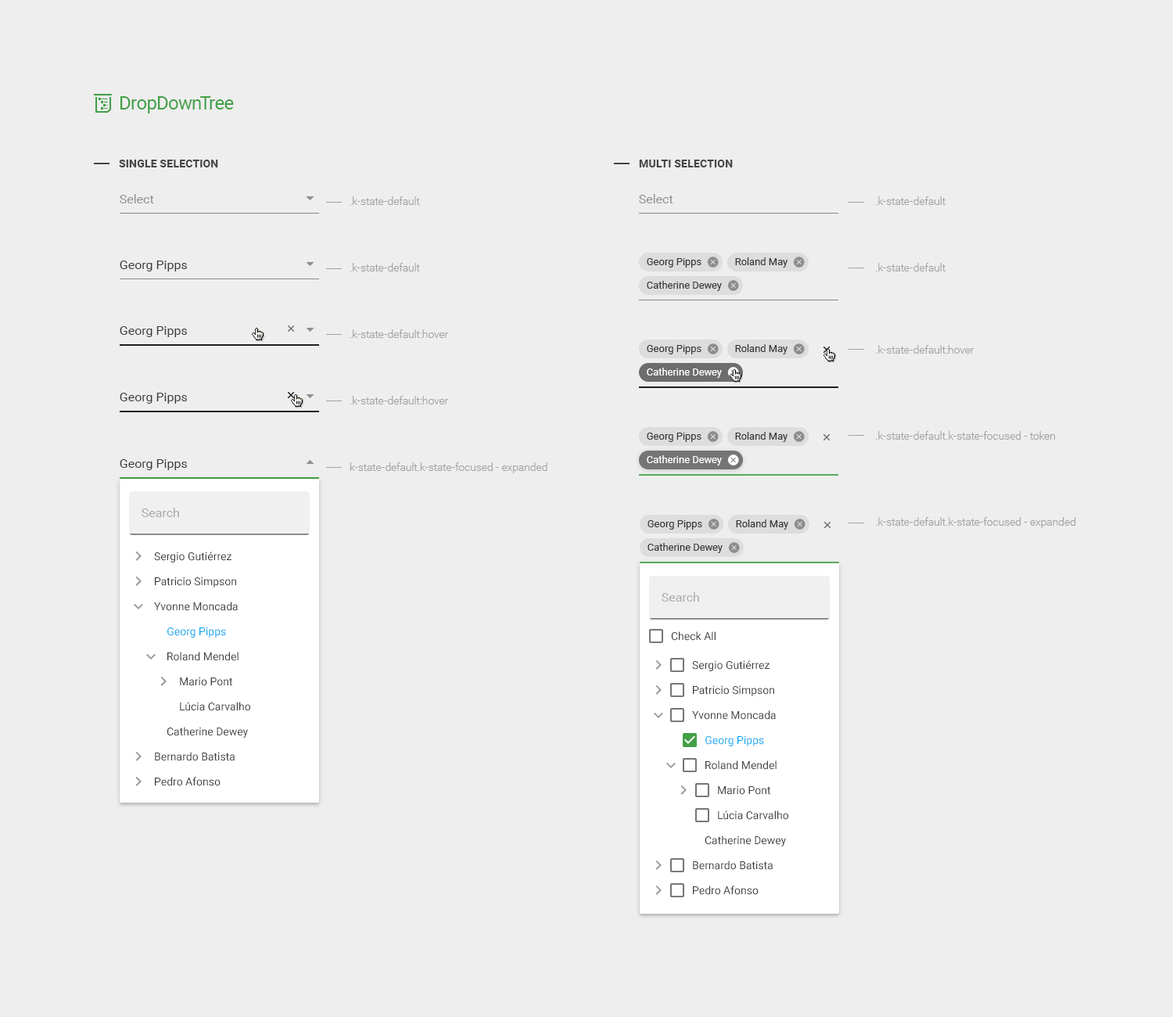
<style>
.page{position:relative;width:1173px;height:1017px;background:#eeeeee}
.page>*{position:absolute;margin:0}
.t1{font:18.8px "Roboto-Regular";letter-spacing:-0.025em;color:#43a047}
.t2{font:10.9px "Roboto-Bold";letter-spacing:0.01em;color:#454545;text-transform:uppercase}
.t3{font:12.5px "Roboto-Regular";color:#8f8f8f}
.t4{font:10.9px/66.5px "Roboto-Light";color:#a1a1a1}
.t5{font:10.2px "Roboto-Regular";color:#363636}
.t6{font:12.5px "Roboto-Regular";color:#3b3b3b}
.t7{font:10.2px "Roboto-Regular";color:#ffffff}
.t8{font:12.5px "Roboto-Regular";color:#a9a9a9}
.t9{font:10.9px/25px "Roboto-Regular";color:#404040}
.t10{font:10.9px "Roboto-Regular";color:#03a9f4}
.t11{font:10.9px "Roboto-Regular";color:#404040}
</style>
<div class="page">
<p class="t1" style="left:120px;top:96px;width:114px;height:17px">DropDownTree</p>
<p class="t2" style="left:119px;top:160px;width:99px;height:7px">single selection</p>
<p class="t2" style="left:639px;top:160px;width:94px;height:7px">multi selection</p>
<p class="t3" style="left:120px;top:194px;width:34px;height:9px">Select</p>
<p class="t4" style="left:350px;top:196px;width:197px;height:277px">.k-state-default<br>.k-state-default<br>.k-state-default:hover<br>.k-state-default:hover<br>k-state-default.k-state-focused - expanded</p>
<p class="t3" style="left:639px;top:194px;width:34px;height:9px">Select</p>
<p class="t4" style="left:876px;top:196px;width:200px;height:332px">.k-state-default<br>.k-state-default<br>.k-state-default:hover<br>.k-state-default.k-state-focused - token<br>.k-state-default.k-state-focused - expanded</p>
<p class="t5" style="left:735px;top:257px;width:53px;height:10px">Roland May</p>
<p class="t6" style="left:120px;top:260px;width:67px;height:11px">Georg Pipps</p>
<p class="t5" style="left:647px;top:258px;width:54px;height:9px">Georg Pipps</p>
<p class="t5" style="left:647px;top:281px;width:75px;height:10px">Catherine Dewey</p>
<p class="t6" style="left:120px;top:326px;width:67px;height:11px">Georg Pipps</p>
<p class="t5" style="left:647px;top:345px;width:54px;height:9px">Georg Pipps</p>
<p class="t5" style="left:735px;top:344px;width:53px;height:10px">Roland May</p>
<p class="t7" style="left:647px;top:368px;width:75px;height:10px">Catherine Dewey</p>
<p class="t6" style="left:120px;top:393px;width:67px;height:11px">Georg Pipps</p>
<p class="t5" style="left:647px;top:432px;width:54px;height:10px">Georg Pipps</p>
<p class="t5" style="left:735px;top:432px;width:53px;height:10px">Roland May</p>
<p class="t6" style="left:120px;top:459px;width:67px;height:11px">Georg Pipps</p>
<p class="t7" style="left:647px;top:455px;width:75px;height:10px">Catherine Dewey</p>
<p class="t8" style="left:142px;top:508px;width:37px;height:9px">Search</p>
<p class="t5" style="left:647px;top:520px;width:55px;height:9px">Georg Pipps</p>
<p class="t5" style="left:736px;top:519px;width:53px;height:10px">Roland May</p>
<p class="t5" style="left:647px;top:543px;width:76px;height:10px">Catherine Dewey</p>
<p class="t9" style="left:154px;top:551px;width:96px;height:235px">Sergio Gutiérrez<br>Patricio Simpson<br>Yvonne Moncada<br><br>Roland Mendel<br>Mario Pont<br>Lúcia Carvalho<br>Catherine Dewey<br>Bernardo Batista<br>Pedro Afonso</p>
<p class="t8" style="left:662px;top:592px;width:37px;height:9px">Search</p>
<p class="t10" style="left:167px;top:626px;width:59px;height:11px">Georg Pipps</p>
<p class="t11" style="left:671px;top:631px;width:45px;height:9px">Check All</p>
<p class="t9" style="left:692px;top:660px;width:96px;height:235px">Sergio Gutiérrez<br>Patricio Simpson<br>Yvonne Moncada<br><br>Roland Mendel<br>Mario Pont<br>Lúcia Carvalho<br>Catherine Dewey<br>Bernardo Batista<br>Pedro Afonso</p>
<p class="t10" style="left:705px;top:735px;width:59px;height:11px">Georg Pipps</p>
</div>
